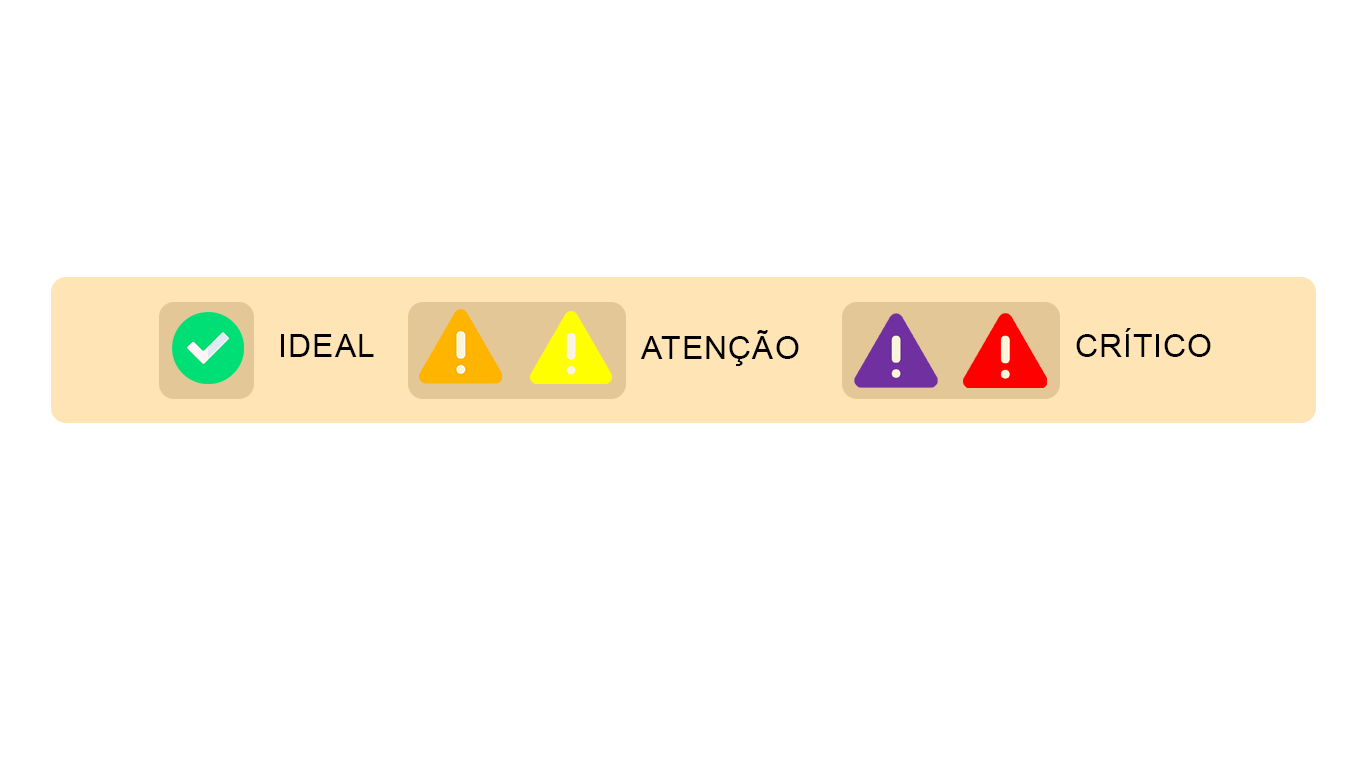
<style>
.page{position:relative;width:1366px;height:768px;background:#ffffff}
.page>*{position:absolute;margin:0}
.t1{font:32.2px "ArialMT";letter-spacing:0.025em;color:#000000}
</style>
<div class="page">
<p class="t1" style="left:1076px;top:328px;width:135px;height:29px">CRÍTICO</p>
<p class="t1" style="left:281px;top:334px;width:93px;height:23px">IDEAL</p>
<p class="t1" style="left:640px;top:330px;width:159px;height:36px">ATENÇÃO</p>
</div>
